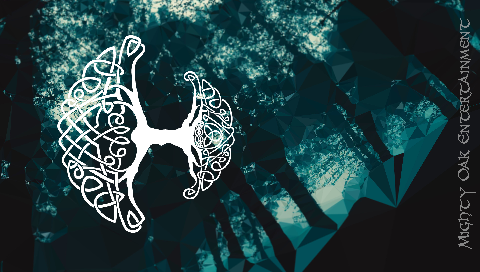
<style>
.page{position:relative;width:480px;height:272px}
.page>*{position:absolute;margin:0}
.t1{font:18px "UnZialish";color:#858585;scale:0.9 1}
</style>
<div class="page">
<p class="t1" style="left:458px;top:18px;width:18px;height:231px;rotate:-90deg">Mighty Oak Entertainment</p>
</div>
